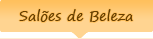
<style>
.page{position:relative;width:153px;height:39px;background:#ffd491}
.page>*{position:absolute;margin:0}
.t1{font:14px "SegoePrint";color:#673f00}
</style>
<div class="page">
<p class="t1" style="left:19px;top:9px;width:114px;height:13px">Salões de Beleza</p>
</div>
